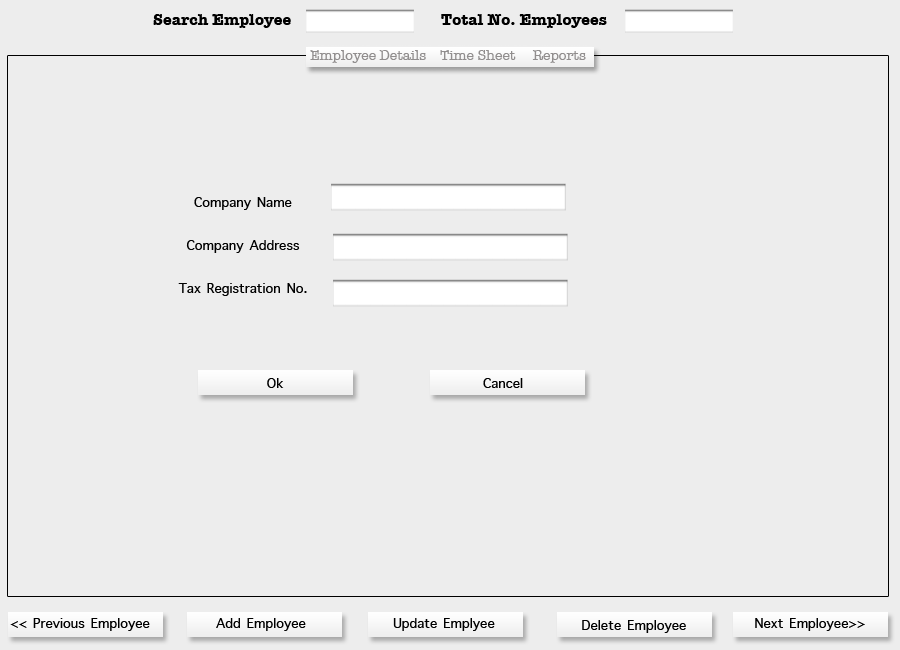
<style>
.page{position:relative;width:900px;height:650px;background:#ededed}
.page>*{position:absolute;margin:0}
.t1{font:16px "AmericanTypewriter-Bold";color:#000000}
.t2{font:14px "AmericanTypewriter";color:#918e8e}
.t3{font:18px "AppleSymbols";color:#000000}
</style>
<div class="page">
<p class="t1" style="left:153px;top:14px;width:454px;height:14px">Search Employee     Total No. Employees</p>
<p class="t2" style="left:310px;top:50px;width:276px;height:13px">Employee Details    Time Sheet     Reports</p>
<p class="t3" style="left:178px;top:197px;width:129px;height:99px;text-align:center">Company Name<br><br>Company Address<br><br>Tax Registration No.</p>
<p class="t3" style="left:267px;top:378px;width:17px;height:10px">Ok</p>
<p class="t3" style="left:483px;top:378px;width:40px;height:10px">Cancel</p>
<p class="t3" style="left:10px;top:618px;width:140px;height:13px">&lt;&lt; Previous Employee</p>
<p class="t3" style="left:216px;top:618px;width:90px;height:13px">Add Employee</p>
<p class="t3" style="left:393px;top:618px;width:102px;height:13px">Update Emplyee</p>
<p class="t3" style="left:582px;top:620px;width:104px;height:13px">Delete Employee</p>
<p class="t3" style="left:755px;top:618px;width:110px;height:13px">Next Employee&gt;&gt;</p>
</div>
